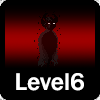
<style>
.page{position:relative;width:100px;height:100px;background:#000000}
.page>*{position:absolute;margin:0}
.t1{font:25px "FranklinGothic-Medium";color:#ffffff}
</style>
<div class="page">
<p class="t1" style="left:16px;top:73px;width:68px;height:18px">Level6</p>
</div>
